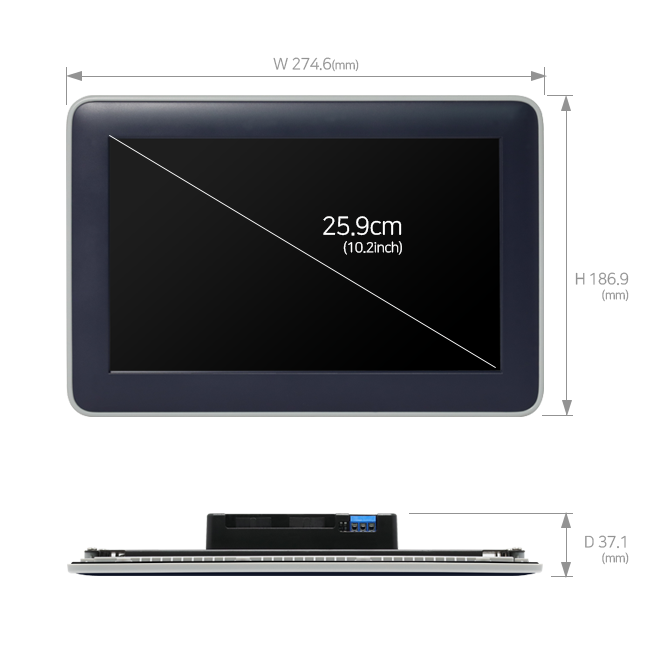
<style>
.page{position:relative;width:650px;height:650px;background:#ffffff}
.page>*{position:absolute;margin:0}
.t1{font:16px "NanumSquareR";letter-spacing:-0.03em;color:#939393}
.t2{font:12px "NanumSquareR";letter-spacing:-0.03em;color:#939393}
.t3{font:14px/18px "NanumSquareR";letter-spacing:-0.03em;color:#ffffff}
.t4{font:25px/18px "NanumSquareR";letter-spacing:-0.03em;color:#ffffff}
.t5{font:16px/15px "NanumSquareR";letter-spacing:-0.03em;color:#939393}
.t6{font:12px/15px "NanumSquareR";letter-spacing:-0.03em;color:#939393}
</style>
<div class="page">
<p class="t1" style="left:273px;top:57px;width:86px;height:15px">W 274.6<span class="t2">(mm)</span></p>
<p class="t3" style="left:323px;top:216px;width:79px;height:39px;text-align:right"><span class="t4">25.9cm<br></span>(10.2inch)</p>
<p class="t5" style="left:575px;top:272px;width:54px;height:30px;text-align:right">H 186.9<br><span class="t6">(mm)</span></p>
<p class="t5" style="left:585px;top:535px;width:44px;height:30px;text-align:right">D 37.1<br><span class="t6">(mm)</span></p>
</div>
